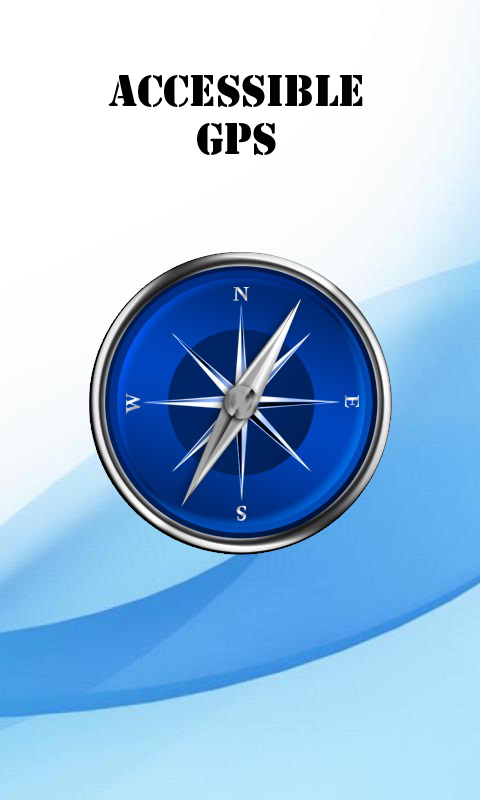
<style>
.page{position:relative;width:480px;height:800px}
.page>*{position:absolute;margin:0}
.t1{font:40px "StencilStd";color:#000000}
</style>
<div class="page">
<p class="t1" style="left:108px;top:75px;width:255px;height:80px;text-align:center">Accessible<br>GPS</p>
</div>
